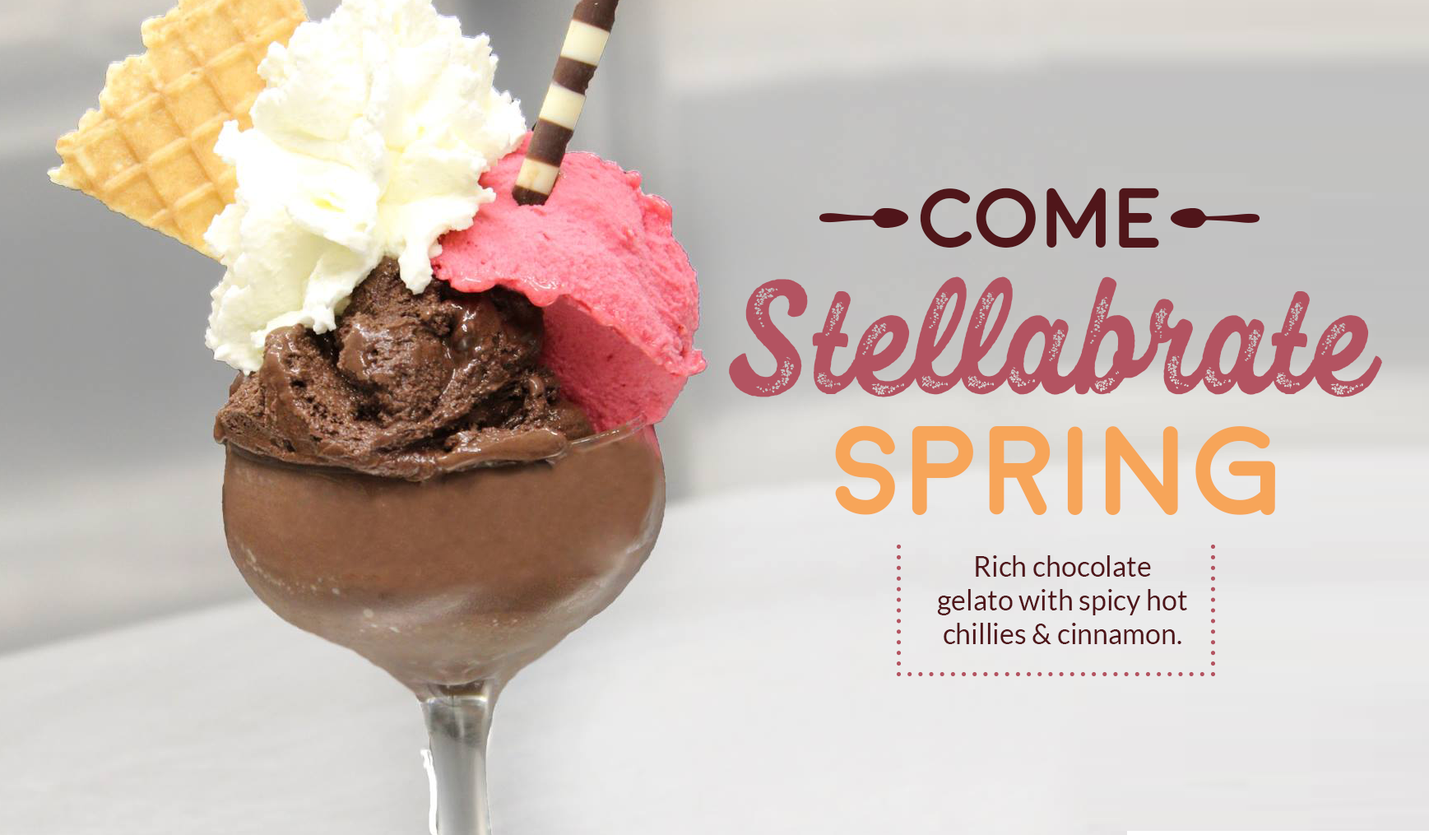
<style>
.page{position:relative;width:1429px;height:835px}
.page>*{position:absolute;margin:0}
.t1{font:84.4px "Moon-Bold";letter-spacing:-0.045em;color:#50161a}
.t2{font:173.2px "FelishaRough";color:#b35361}
.t3{font:198.9px "FelishaRough";color:#b35361}
.t4{font:126.9px "Moon-Bold";letter-spacing:-0.028em;color:#f7a559}
.t5{font:28px "Lato-Regular";color:#50161a}
</style>
<div class="page">
<p class="t1" style="left:919px;top:188px;width:240px;height:60px">Come</p>
<p class="t2" style="left:729px;top:276px;width:653px;height:121px"><span class="t3">S</span>tellabrate</p>
<p class="t4" style="left:835px;top:425px;width:440px;height:90px">Spring</p>
<p class="t5" style="left:937px;top:555px;width:250px;height:89px;text-align:center">Rich chocolate <br>gelato with spicy hot <br>chillies &amp; cinnamon.</p>
</div>
